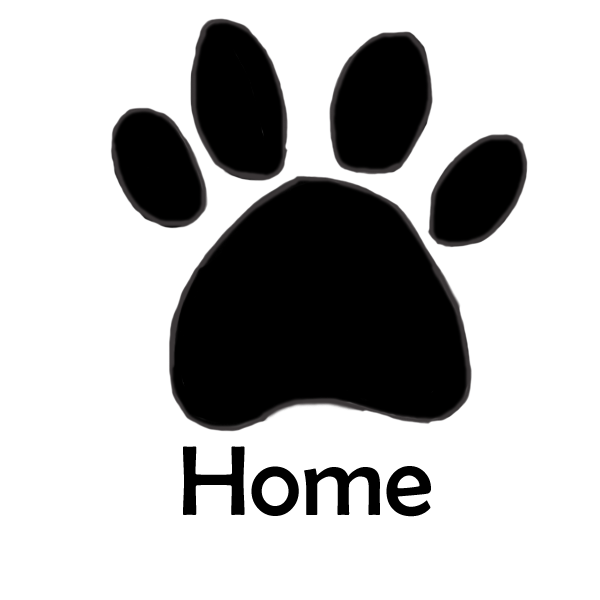
<style>
.page{position:relative;width:600px;height:600px;background:#ffffff}
.page>*{position:absolute;margin:0}
.t1{font:100px "BerlinSansFB-Reg";color:#000000}
</style>
<div class="page">
<p class="t1" style="left:183px;top:446px;width:248px;height:71px">Home</p>
</div>
